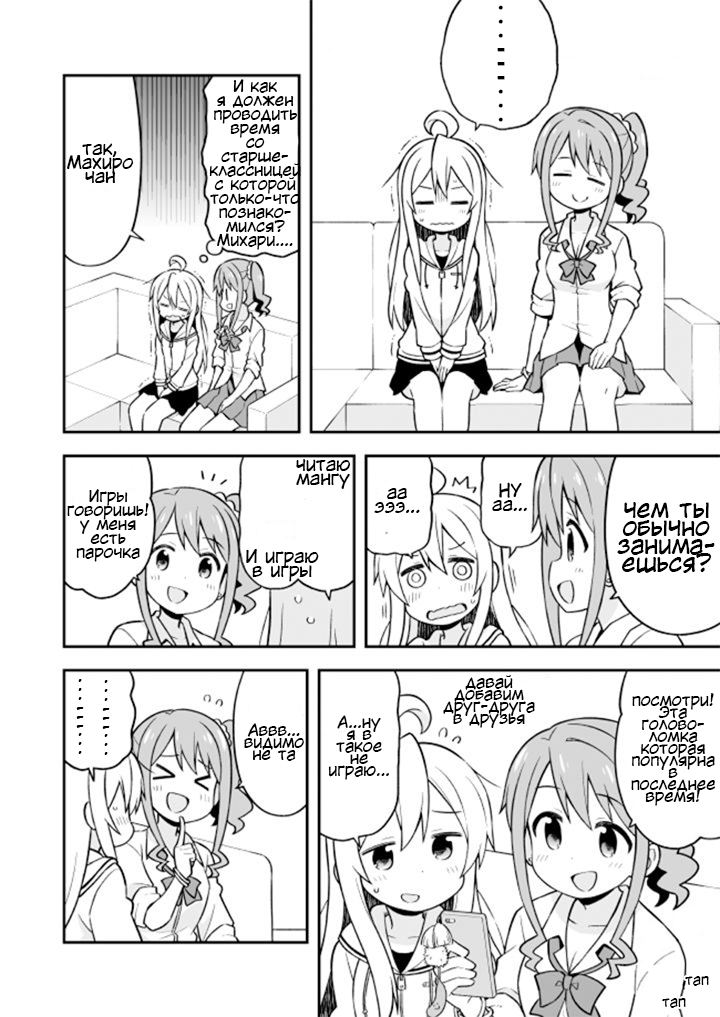
<style>
.page{position:relative;width:720px;height:1017px;background:#ffffff}
.page>*{position:absolute;margin:0}
.t1{font:18px/14px "MyFontBold";color:#000000}
.t2{font:16px/14px "KuraiVoice2";color:#000000}
.t3{font:18px/14px "KuraiVoice2";color:#000000}
.t4{font:24px/18px "KuraiVoice2";color:#000000}
.t5{font:16px/12px "KuraiVoice2";color:#000000}
.t6{font:16px/9px "KuraiVoice2";color:#000000}
.t7{font:14px "KuraiVoice2";color:#000000}
</style>
<div class="page">
<p class="t1" style="left:497px;top:5px;width:8px;height:117px;text-align:center">·<br>·<br>·<br>-<br>-<br>-<br>·<br>·<br>·</p>
<p class="t2" style="left:209px;top:79px;width:92px;height:171px;text-align:center">И как<br>я должен<br>проводить<br>время<br>со<br>старше-<br>классницей<br>с которой<br>только-что<br>познако-<br>мился?<br>Михари....</p>
<p class="t3" style="left:67px;top:143px;width:67px;height:40px;text-align:center">так,<br>Махиро<br>чан</p>
<p class="t3" style="left:296px;top:459px;width:55px;height:30px;text-align:center">читаю<br>мангу</p>
<p class="t3" style="left:492px;top:482px;width:35px;height:29px;text-align:center">НУ<br>аа...</p>
<p class="t2" style="left:67px;top:489px;width:82px;height:73px;text-align:center">Игры<br>говоришь!<br>у меня<br>есть<br>парочка</p>
<p class="t3" style="left:374px;top:488px;width:46px;height:25px;text-align:center">аа<br>эээ...</p>
<p class="t4" style="left:617px;top:502px;width:98px;height:71px;text-align:center">чем ты<br>обычно<br>занима-<br>ешься?</p>
<p class="t3" style="left:246px;top:549px;width:73px;height:33px;text-align:center">И играю<br>в игры</p>
<p class="t5" style="left:443px;top:675px;width:92px;height:53px;text-align:center">давай<br>добавим<br>друг-друга<br>в друзья</p>
<p class="t6" style="left:76px;top:679px;width:8px;height:75px;text-align:center">·<br>·<br>·<br>-<br>-<br>-<br>·<br>·<br>·</p>
<p class="t6" style="left:102px;top:680px;width:8px;height:75px;text-align:center">·<br>·<br>·<br>-<br>-<br>-<br>·<br>·<br>·</p>
<p class="t5" style="left:631px;top:693px;width:85px;height:113px;text-align:center">посмотри!<br>Эта<br>голово-<br>ломка<br>которая<br>популярна<br>в<br>последнее<br>время!</p>
<p class="t5" style="left:244px;top:723px;width:60px;height:38px;text-align:center">Аввв...<br>видимо<br>не та</p>
<p class="t5" style="left:328px;top:715px;width:61px;height:65px;text-align:center">А...ну<br>я в<br>такое<br>не<br>играю...</p>
<p class="t7" style="left:685px;top:976px;width:24px;height:10px">тап</p>
<p class="t7" style="left:662px;top:998px;width:24px;height:10px">тап</p>
</div>
